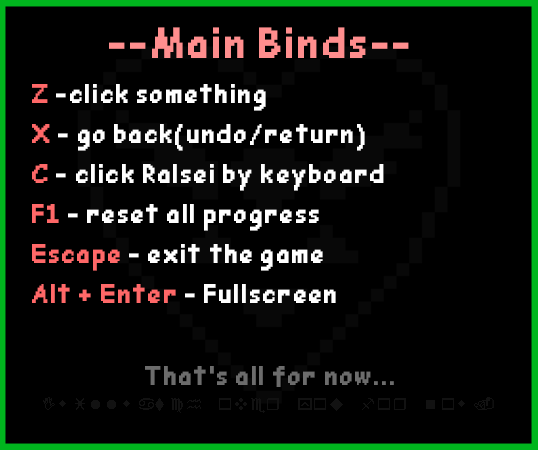
<style>
.page{position:relative;width:538px;height:450px;background:#000000}
.page>*{position:absolute;margin:0}
.t1{font:21.3px "PixelComicSansUndertaleSansFont";letter-spacing:0.005em;color:#ff8e8e}
.t2{font:13.3px/40px "PixelComicSansUndertaleSansFont";letter-spacing:0.005em;color:#ffffff}
.t3{font:13.3px/40px "PixelComicSansUndertaleSansFont";letter-spacing:0.005em;color:#ff6868}
.t4{font:13.3px "PixelComicSansUndertaleSansFont";letter-spacing:0.005em;color:#6c6c6c}
</style>
<div class="page">
<p class="t1" style="left:109px;top:27px;width:300px;height:31px">--Main Binds--</p>
<p class="t2" style="left:32px;top:84px;width:352px;height:219px"><span class="t3">Z </span>-click something<br><span class="t3">X</span> - go back(undo/return)<br><span class="t3">C</span> - click Ralsei by keyboard<br><span class="t3">F1</span> - reset all progress<br><span class="t3">Escape </span>- exit the game<br><span class="t3">Alt + Enter </span>- Fullscreen</p>
<p class="t4" style="left:145px;top:366px;width:249px;height:21px">That’s all for now...</p>
</div>
